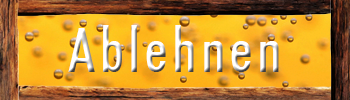
<style>
.page{position:relative;width:350px;height:100px}
.page>*{position:absolute;margin:0}
.t1{font:62px "FuturaBT-MediumCondensed";letter-spacing:0.07em}
</style>
<div class="page">
<p class="t1" style="left:68px;top:25px;width:211px;height:47px">Ablehnen</p>
</div>
